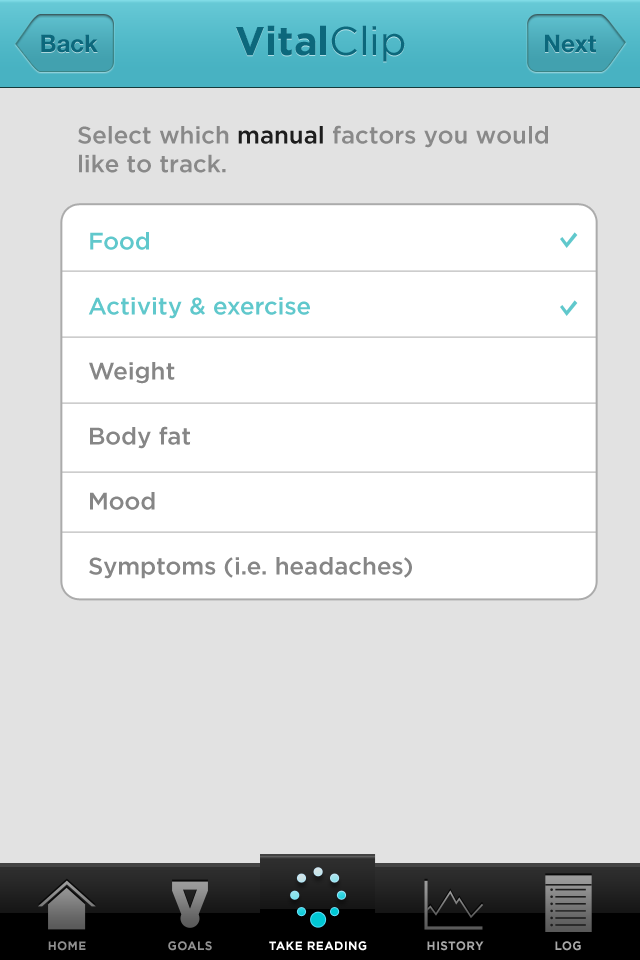
<style>
.page{position:relative;width:640px;height:960px;background:#e2e2e2}
.page>*{position:absolute;margin:0}
.t1{font:40px "Gotham-Bold";color:#0c687c}
.t2{font:40px "Gotham-Book";color:#0c687c}
.t3{font:24px "HelveticaNeue-Bold";color:#0c687c}
.t4{font:24px "Gotham-Medium";color:#898989}
.t5{font:24px "Gotham-Medium";color:#1d1d1d}
.t6{font:24px/65px "Gotham-Medium";color:#868686}
.t7{font:24px/65px "Gotham-Medium";color:#60c8cc}
.t8{font:12px "Gotham-Bold";letter-spacing:0.025em;color:#8f8f8f;text-transform:uppercase}
.t9{font:12px "Gotham-Bold";letter-spacing:0.025em;color:#929292;text-transform:uppercase}
.t10{font:12px "Gotham-Bold";letter-spacing:0.025em;color:#ffffff;text-transform:uppercase}
.t11{font:12px "Gotham-Bold";letter-spacing:0.025em;color:#a8a8a8;text-transform:uppercase}
</style>
<div class="page">
<p class="t1" style="left:236px;top:25px;width:169px;height:37px">Vital<span class="t2">Clip</span></p>
<p class="t3" style="left:41px;top:34px;width:57px;height:19px">Back</p>
<p class="t3" style="left:545px;top:34px;width:51px;height:19px">Next</p>
<p class="t4" style="left:78px;top:125px;width:470px;height:48px">Select which <span class="t5">manual </span>factors you would<br>like to track.</p>
<p class="t6" style="left:88px;top:232px;width:324px;height:347px"><span class="t7">Food<br>Activity &amp; exercise<br></span>Weight<br>Body fat<br>Mood<br>Symptoms (i.e. headaches)</p>
<p class="t8" style="left:48px;top:941px;width:38px;height:10px">Home</p>
<p class="t9" style="left:168px;top:941px;width:44px;height:10px">Goals</p>
<p class="t10" style="left:269px;top:941px;width:98px;height:10px">Take reading</p>
<p class="t11" style="left:427px;top:941px;width:57px;height:10px">History</p>
<p class="t11" style="left:555px;top:941px;width:26px;height:10px">Log</p>
</div>
